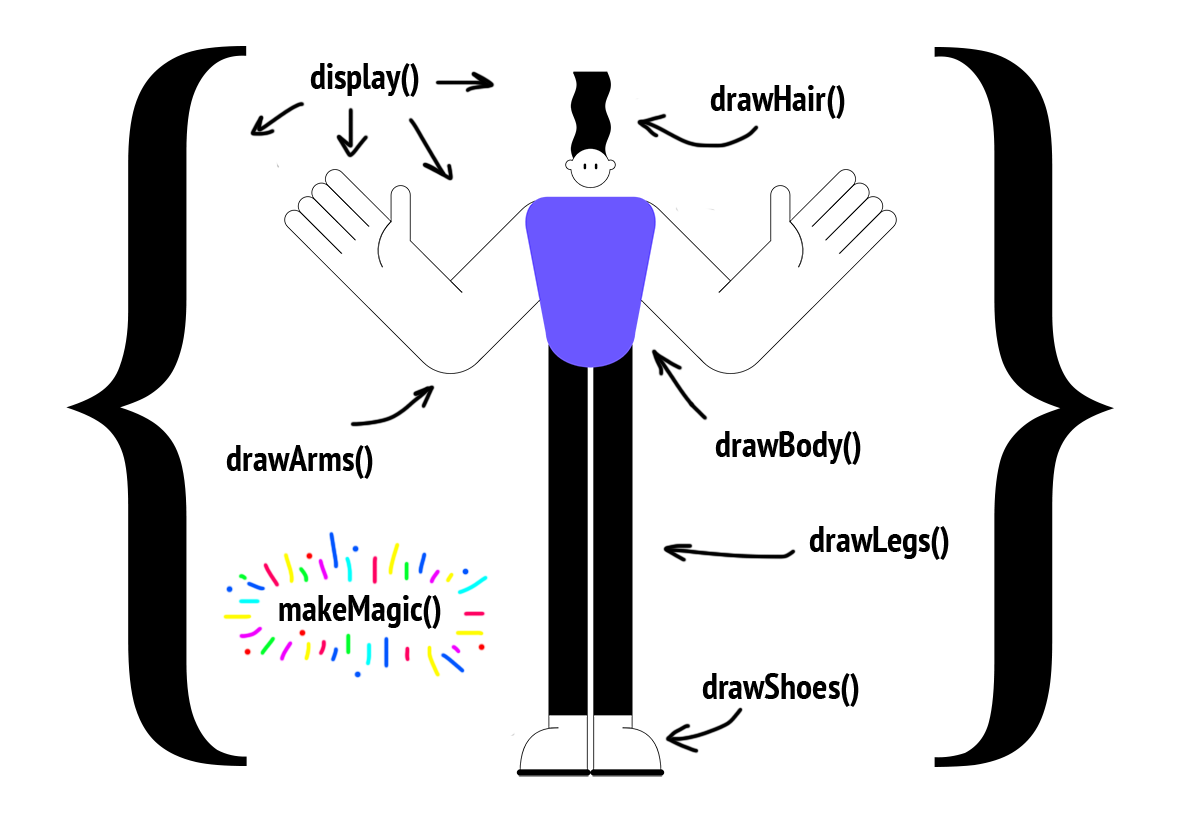
<style>
.page{position:relative;width:1182px;height:818px;background:#ffffff}
.page>*{position:absolute;margin:0}
.t1{font:800px "Palatino-Roman";color:#000000}
.t2{font:36px "PTSans-NarrowBold";color:#000000}
</style>
<div class="page">
<p class="t1" style="left:66px;top:46px;width:181px;height:720px">{</p>
<p class="t1" style="left:934px;top:47px;width:180px;height:720px">}</p>
<p class="t2" style="left:310px;top:63px;width:109px;height:34px">display()</p>
<p class="t2" style="left:710px;top:85px;width:135px;height:34px">drawHair()</p>
<p class="t2" style="left:715px;top:431px;width:146px;height:34px">drawBody()</p>
<p class="t2" style="left:226px;top:445px;width:147px;height:34px">drawArms()</p>
<p class="t2" style="left:809px;top:526px;width:140px;height:34px">drawLegs()</p>
<p class="t2" style="left:279px;top:595px;width:162px;height:34px">makeMagic()</p>
<p class="t2" style="left:702px;top:673px;width:157px;height:34px">drawShoes()</p>
</div>
